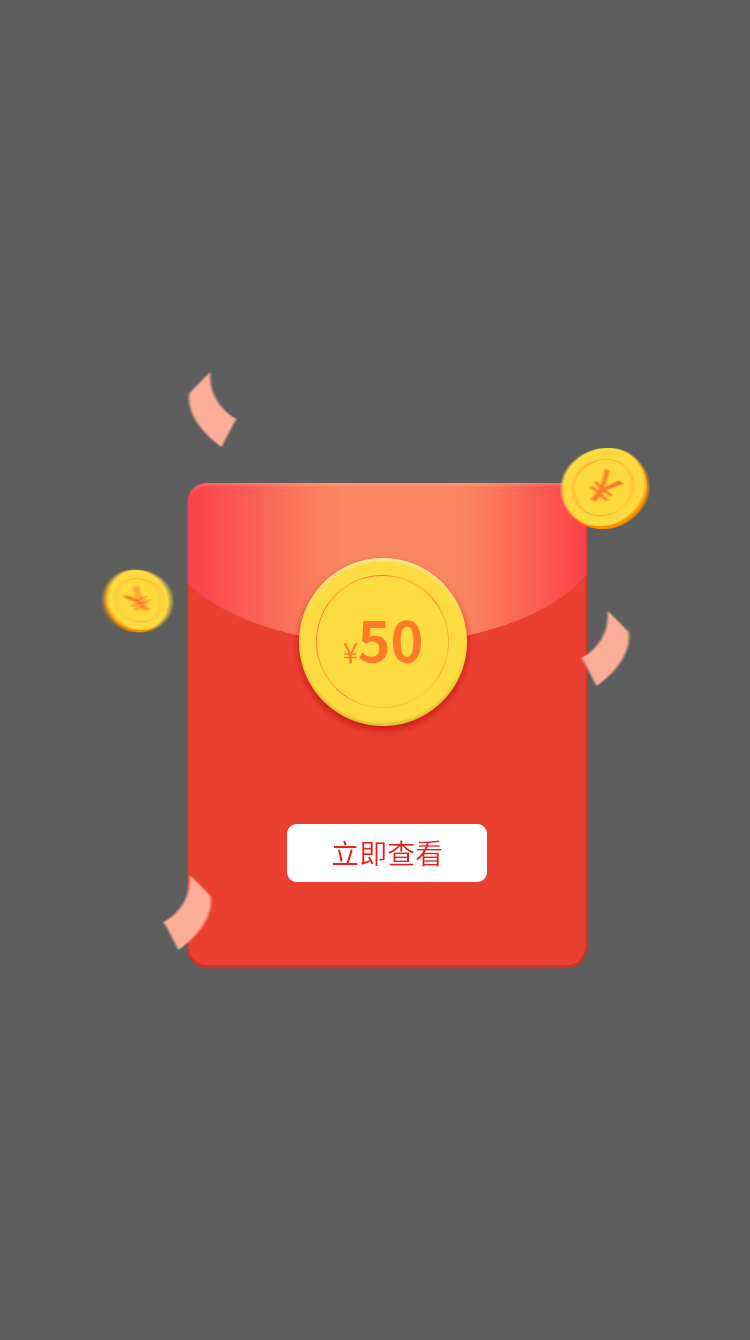
<style>
.page{position:relative;width:750px;height:1340px;background:#5e5e5e}
.page>*{position:absolute;margin:0}
.t1{font:56px "SourceHanSansCN-Bold";color:#fe7928;text-transform:uppercase}
.t2{font:28px "SourceHanSansCN-Regular";color:#fe7928;text-transform:uppercase}
.t3{font:28px "SourceHanSansCN-Regular";color:#e61f18;text-transform:uppercase}
</style>
<div class="page">
<p class="t1" style="left:359px;top:620px;width:62px;height:44px">50</p>
<p class="t2" style="left:343px;top:643px;width:15px;height:21px">¥</p>
<p class="t3" style="left:332px;top:840px;width:110px;height:27px">立即查看</p>
</div>
